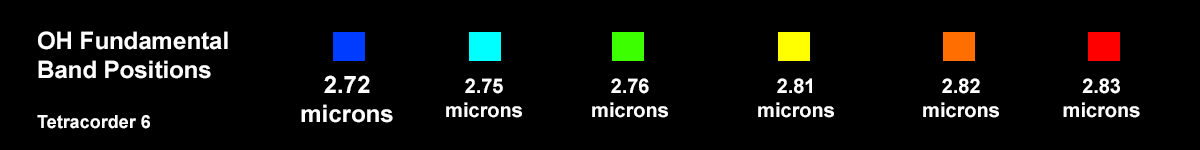
<style>
.page{position:relative;width:1200px;height:150px;background:#000000}
.page>*{position:absolute;margin:0}
.t1{font:24px "Arial-BoldMT";color:#fefefe}
.t2{font:18px "Arial-BoldMT";color:#fefefe}
.t3{font:20px "Arial-BoldMT";color:#fefefe}
</style>
<div class="page">
<p class="t1" style="left:37px;top:31px;width:191px;height:98px">OH Fundamental<br>Band Positions<br><br><span class="t2">Tetracorder 6</span></p>
<p class="t1" style="left:301px;top:75px;width:92px;height:48px;text-align:center">2.72<br>microns</p>
<p class="t3" style="left:446px;top:78px;width:76px;height:40px;text-align:center">2.75<br>microns</p>
<p class="t3" style="left:592px;top:78px;width:76px;height:40px;text-align:center">2.76<br>microns</p>
<p class="t3" style="left:758px;top:78px;width:76px;height:40px;text-align:center">2.81<br>microns</p>
<p class="t3" style="left:923px;top:78px;width:76px;height:40px;text-align:center">2.82<br>microns</p>
<p class="t3" style="left:1063px;top:78px;width:77px;height:40px;text-align:center">2.83<br>microns</p>
</div>
